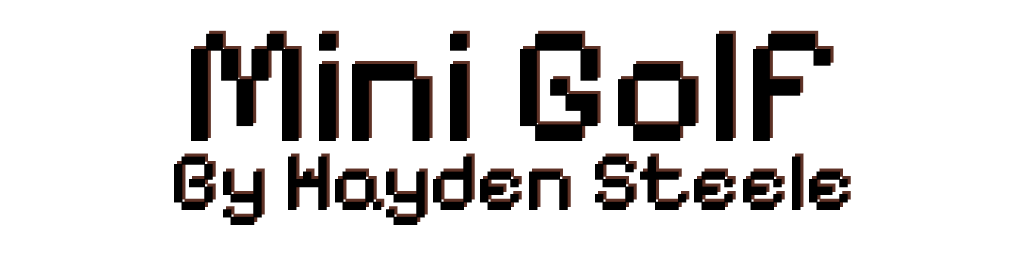
<style>
.page{position:relative;width:1024px;height:256px;background:#ffffff}
.page>*{position:absolute;margin:0}
.t1{font:166.7px "PixelifySans-Regular";color:#000000}
.t2{font:83.3px "PixelifySans-Regular";color:#000000}
.t3{font:83.3px "PixelifySans-Regular"}
</style>
<div class="page">
<p class="t1" style="left:194px;top:30px;width:640px;height:108px">Mini Golf</p>
<p class="t1" style="left:191px;top:33px;width:640px;height:108px">Mini Golf</p>
<p class="t2" style="left:174px;top:156px;width:674px;height:69px">By Hayden Steele</p>
<p class="t3" style="left:177px;top:153px;width:674px;height:69px">By Hayden Steele</p>
</div>
